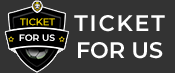
<style>
.page{position:relative;width:175px;height:73px;background:#333333}
.page>*{position:absolute;margin:0}
.t1{font:22.5px "Montserrat-SemiBold";letter-spacing:0.08em;color:#ffffff;text-transform:uppercase}
.t2{font:22.5px "Montserrat-SemiBold";color:#ffffff;text-transform:uppercase}
.t3{font:9px "Montserrat-Regular";color:#ead000;text-transform:uppercase;font-weight:bold;scale:1.05 1}
.t4{font:9px "Montserrat-SemiBold";color:#ffffff;text-transform:uppercase;scale:1.03 1}
</style>
<div class="page">
<p class="t1" style="left:74px;top:15px;width:91px;height:44px;text-align:center">Ticket<br><span class="t2">For Us</span></p>
<p class="t3" style="left:20px;top:18px;width:35px;height:8px">Ticket</p>
<p class="t4" style="left:19px;top:34px;width:36px;height:7px">For Us</p>
</div>
